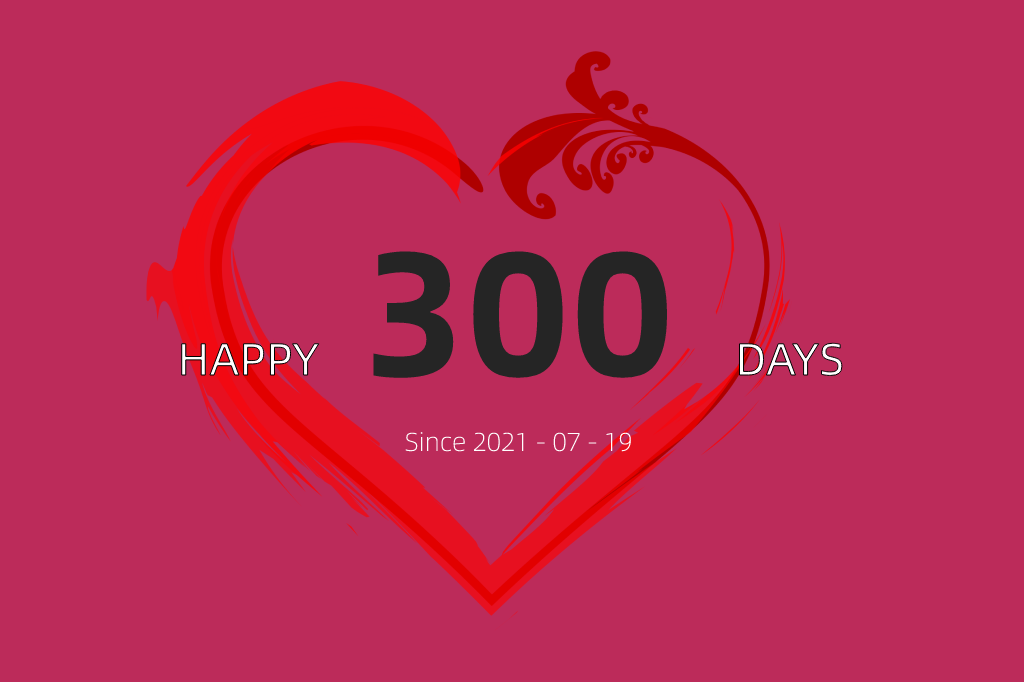
<style>
.page{position:relative;width:1024px;height:682px;background:#bc2b5a}
.page>*{position:absolute;margin:0}
.t1{font:177px "AlibabaPuHuiTi-Bold";color:#252525}
.t2{font:45px "AlibabaPuHuiTi-Regular"}
.t3{font:26px "AlibabaPuHuiTi-Light";color:#ffffff}
</style>
<div class="page">
<p class="t1" style="left:373px;top:251px;width:294px;height:127px">300</p>
<p class="t2" style="left:180px;top:342px;width:663px;height:35px">HAPPY                                    DAYS</p>
<p class="t3" style="left:405px;top:432px;width:226px;height:20px">Since 2021 - 07 - 19</p>
</div>
